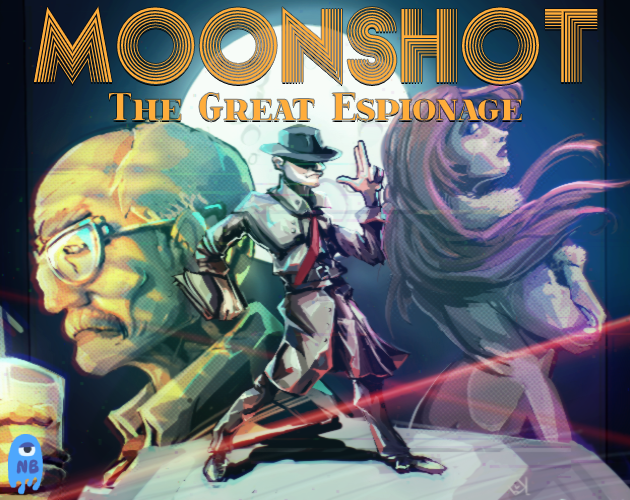
<style>
.page{position:relative;width:630px;height:500px}
.page>*{position:absolute;margin:0}
.t1{font:96px "Akka";color:#ffad3b}
.t2{font:40px "spinweradCBold";color:#ffad3b}
</style>
<div class="page">
<p class="t1" style="left:33px;top:6px;width:565px;height:79px">MOONSHOT</p>
<p class="t2" style="left:109px;top:93px;width:413px;height:28px">The Great Espionage</p>
</div>
